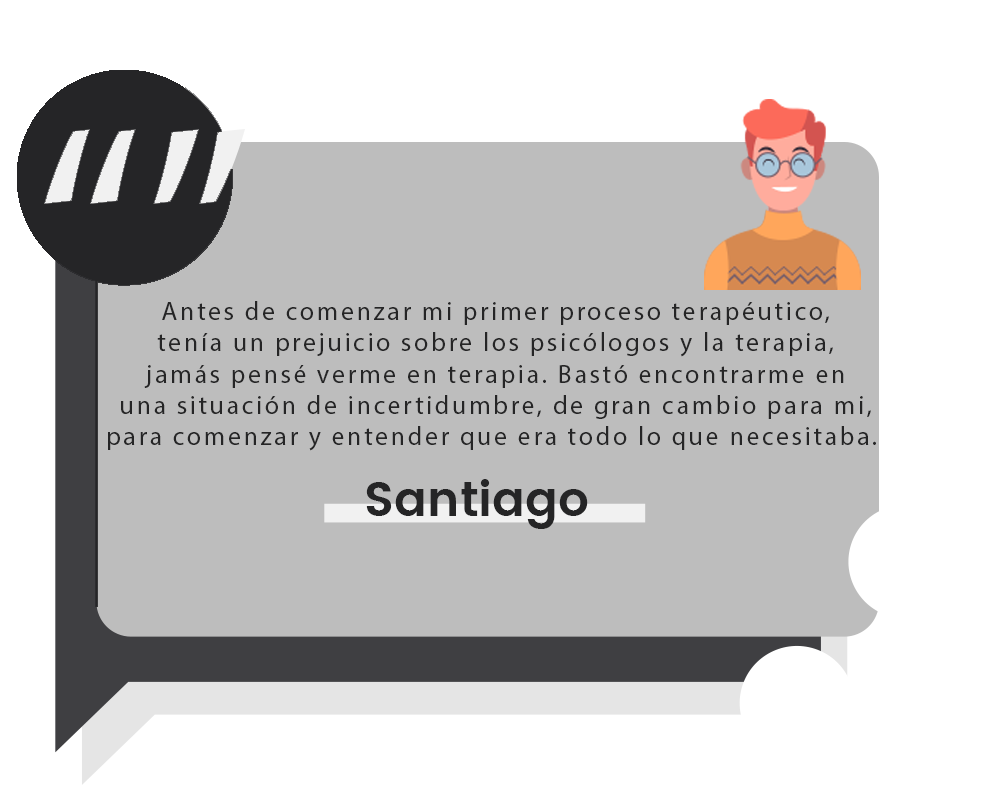
<style>
.page{position:relative;width:1000px;height:800px;background:#bdbdbd}
.page>*{position:absolute;margin:0}
.t1{font:26px "MyriadPro-Regular";letter-spacing:0.1em;color:#252526}
.t2{font:48px "Poppins-SemiBold";color:#252526}
</style>
<div class="page">
<p class="t1" style="left:108px;top:301px;width:768px;height:150px;text-align:center">Antes de comenzar mi primer proceso terapéutico, <br>tenía un prejuicio sobre los psicólogos y la terapia, <br>jamás pensé verme en terapia. Bastó encontrarme en <br>una situación de incertidumbre, de gran cambio para mi, <br>para comenzar y entender que era todo lo que necesitaba.</p>
<p class="t2" style="left:366px;top:479px;width:222px;height:50px">Santiago</p>
</div>
